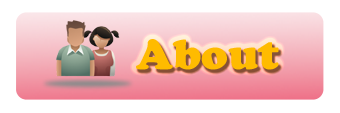
<style>
.page{position:relative;width:340px;height:113px;background:#ffffff}
.page>*{position:absolute;margin:0}
.t1{font:44.3px "CooperBlack";color:#ffbb00}
</style>
<div class="page">
<p class="t1" style="left:136px;top:39px;width:143px;height:31px">About</p>
</div>
